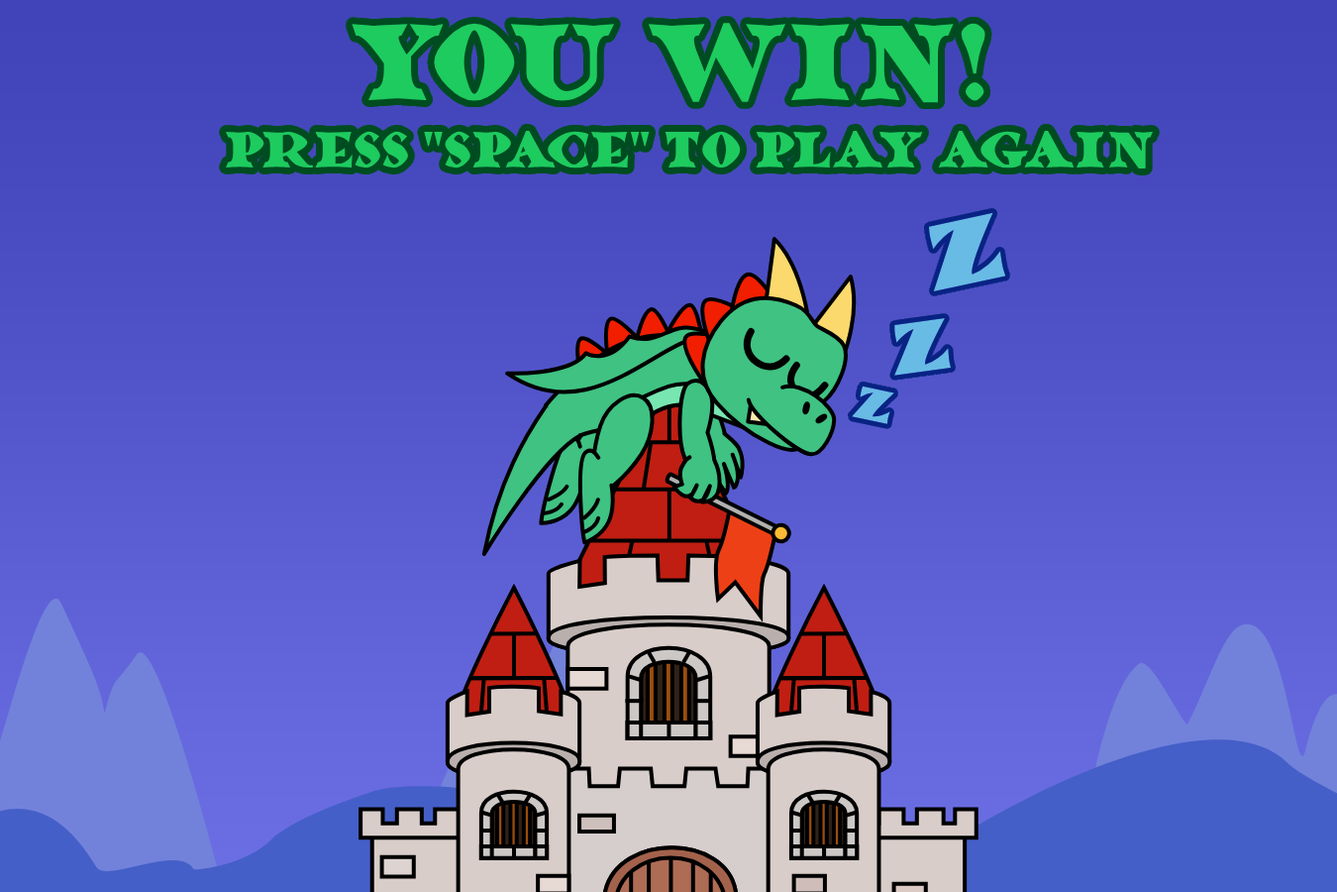
<style>
.page{position:relative;width:1337px;height:892px}
.page>*{position:absolute;margin:0}
.t1{font:117.9px "Dragonlands";color:#1ecb5f}
.t2{font:55.5px "Dragonlands";color:#1ecb5f}
.t3{font:99.8px "Dragonlands";color:#68bbe5;scale:1.41 1}
.t4{font:77.3px "Dragonlands";color:#68bbe5;scale:1.41 1}
.t5{font:49.1px "Dragonlands";color:#68bbe5;scale:1.41 1}
</style>
<div class="page">
<p class="t1" style="left:352px;top:23px;width:634px;height:80px">YOU WIN!</p>
<p class="t2" style="left:226px;top:131px;width:927px;height:38px">Press "SPACE" to Play Again</p>
<p class="t3" style="left:929px;top:212px;width:78px;height:79px;rotate:-12deg">z</p>
<p class="t4" style="left:895px;top:318px;width:56px;height:57px;rotate:-8deg">z</p>
<p class="t5" style="left:852px;top:385px;width:43px;height:39px;rotate:12deg">z</p>
</div>
